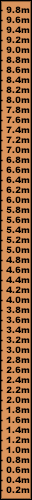
<style>
.page{position:relative;width:32px;height:500px;background:#db955d}
.page>*{position:absolute;margin:0}
.t1{font:9px/10px "Arial-Black";color:#000000}
</style>
<div class="page">
<p class="t1" style="left:0px;top:6px;width:30px;height:487px">- 9.8m<br>- 9.6m<br>- 9.4m<br>- 9.2m<br>- 9.0m<br>- 8.8m<br>- 8.6m<br>- 8.4m<br>- 8.2m<br>- 8.0m<br>- 7.8m<br>- 7.6m<br>- 7.4m<br>- 7.2m<br>- 7.0m<br>- 6.8m<br>- 6.6m<br>- 6.4m<br>- 6.2m<br>- 6.0m<br>- 5.8m<br>- 5.6m<br>- 5.4m<br>- 5.2m<br>- 5.0m<br>- 4.8m<br>- 4.6m<br>- 4.4m<br>- 4.2m<br>- 4.0m<br>- 3.8m<br>- 3.6m<br>- 3.4m<br>- 3.2m<br>- 3.0m<br>- 2.8m<br>- 2.6m<br>- 2.4m<br>- 2.2m<br>- 2.0m<br>- 1.8m<br>- 1.6m<br>- 1.4m<br>- 1.2m<br>- 1.0m<br>- 0.8m<br>- 0.6m<br>- 0.4m<br>- 0.2m</p>
</div>
